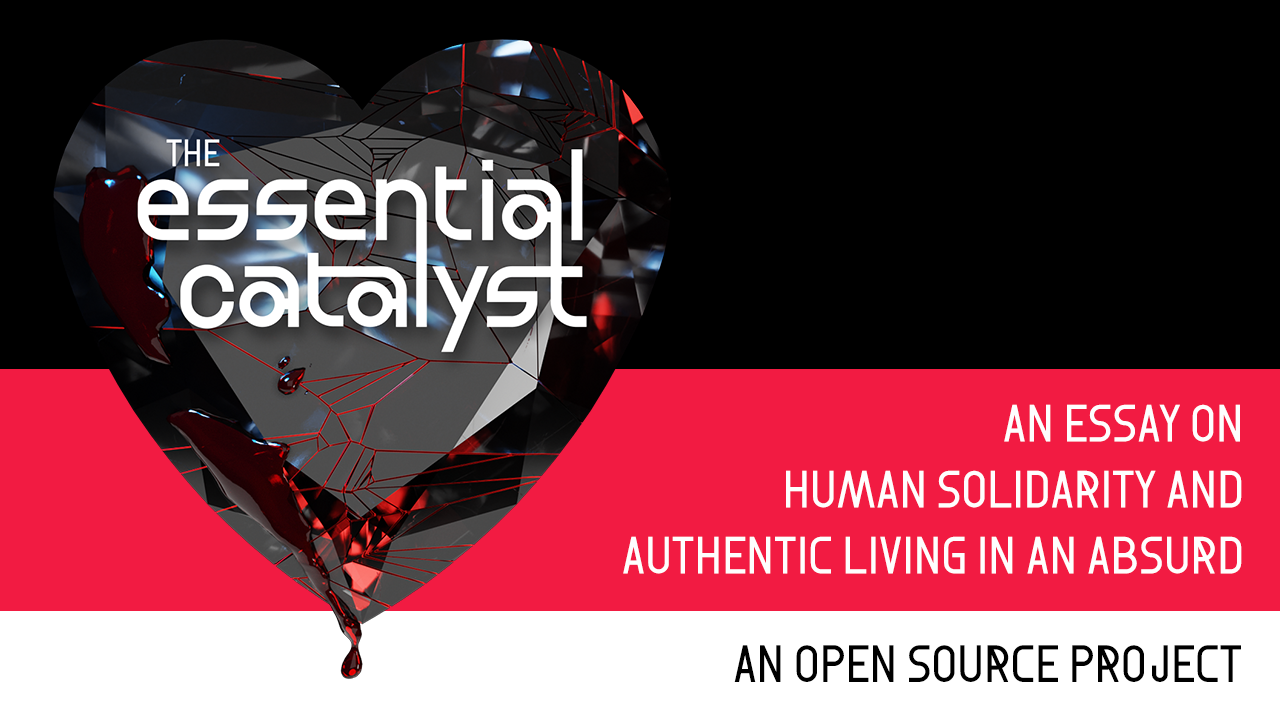
<style>
.page{position:relative;width:1280px;height:720px;background:#000000}
.page>*{position:absolute;margin:0}
.t1{font:50.9px/66px "Format_1452";color:#fefefe;text-transform:uppercase}
.t2{font:50.9px "Format_1452";color:#000000;text-transform:uppercase}
</style>
<div class="page">
<p class="t1" style="left:623px;top:404px;width:619px;height:170px;text-align:right">an essay on <br>human solidarity and authentic living in an absurd world</p>
<p class="t2" style="left:734px;top:645px;width:507px;height:37px">an open source project</p>
</div>
